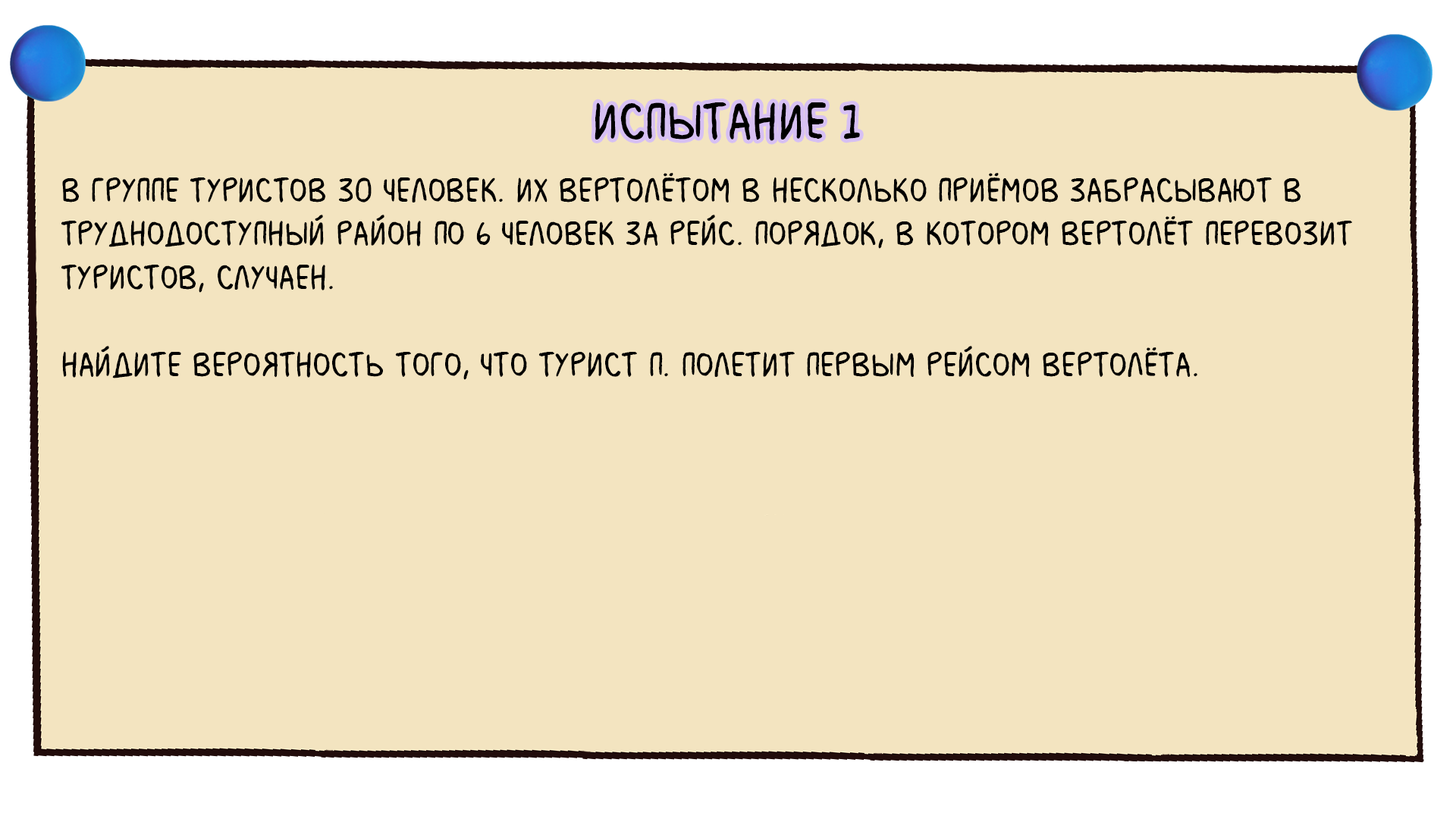
<style>
.page{position:relative;width:1456px;height:819px;background:#f3e4c0}
.page>*{position:absolute;margin:0}
.t1{font:54.6px "MilkMustacheBB";color:#000000}
.t2{font:36.4px "MilkMustacheBB";color:#000000}
</style>
<div class="page">
<p class="t1" style="left:595px;top:102px;width:265px;height:39px">испытание 1</p>
<p class="t2" style="left:61px;top:173px;width:1291px;height:207px">В группе туристов 30 человек. Их вертолётом в несколько приёмов забрасывают в <br>труднодоступный район по 6 человек за рейс. Порядок, в котором вертолёт перевозит <br>туристов, случаен. <br><br>Найдите вероятность того, что турист П. полетит первым рейсом вертолёта.</p>
</div>
